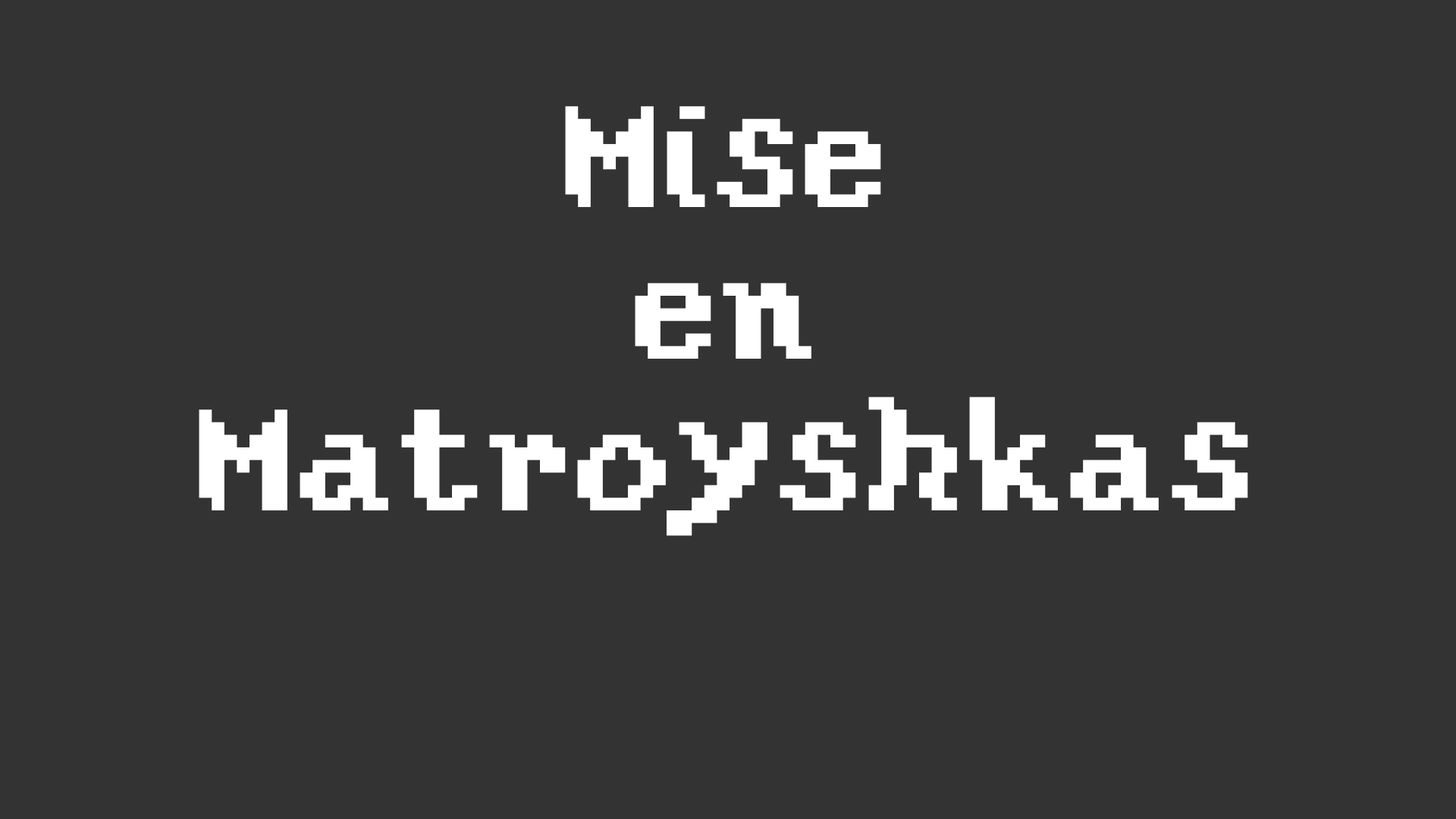
<style>
.page{position:relative;width:1456px;height:819px;background:#333333}
.page>*{position:absolute;margin:0}
.t1{font:151.7px/151.7px "YosterIslandReg";color:#ffffff}
</style>
<div class="page">
<p class="t1" style="left:199px;top:106px;width:1049px;height:430px;text-align:center">Mise<br>en<br>Matroyshkas</p>
</div>
